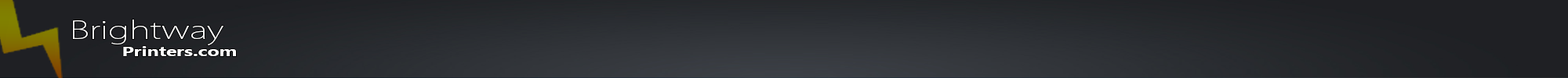
<style>
.page{position:relative;width:1568px;height:78px}
.page>*{position:absolute;margin:0}
.t1{font:13.7px "SegoeUI-Bold";color:#ffffff;scale:1.41 1}
.t2{font:24.9px "KozGoPr6N-ExtraLight";color:#ffffff;scale:1.41 1}
</style>
<div class="page">
<p class="t1" style="left:73px;top:20px;width:163px;height:36px;text-align:right"><span class="t2">Brightway<br>     </span>Printers.com</p>
</div>
